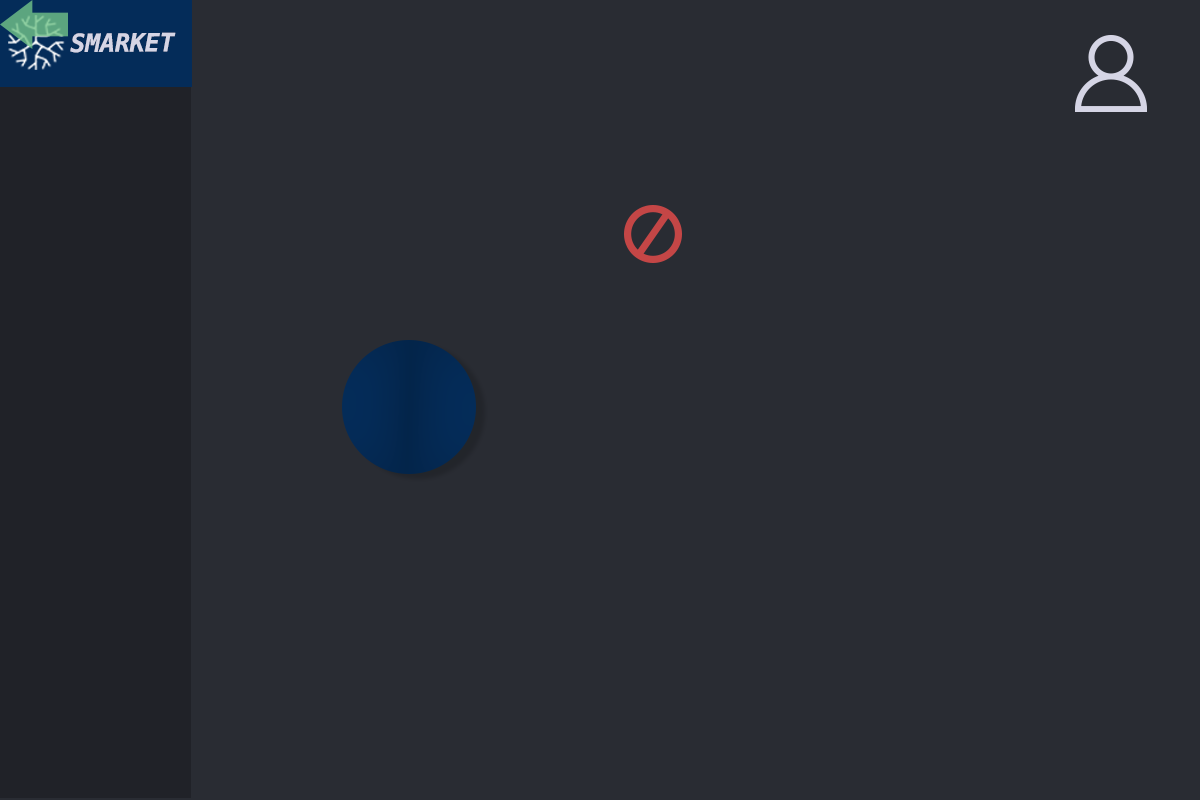
<style>
.page{position:relative;width:1200px;height:800px;background:#292c33}
.page>*{position:absolute;margin:0}
.t1{font:25.1px "Hack-BoldOblique";letter-spacing:-0.01em;color:#d5d5e5}
</style>
<div class="page">
<p class="t1" style="left:70px;top:32px;width:106px;height:21px">SMARKET</p>
</div>
